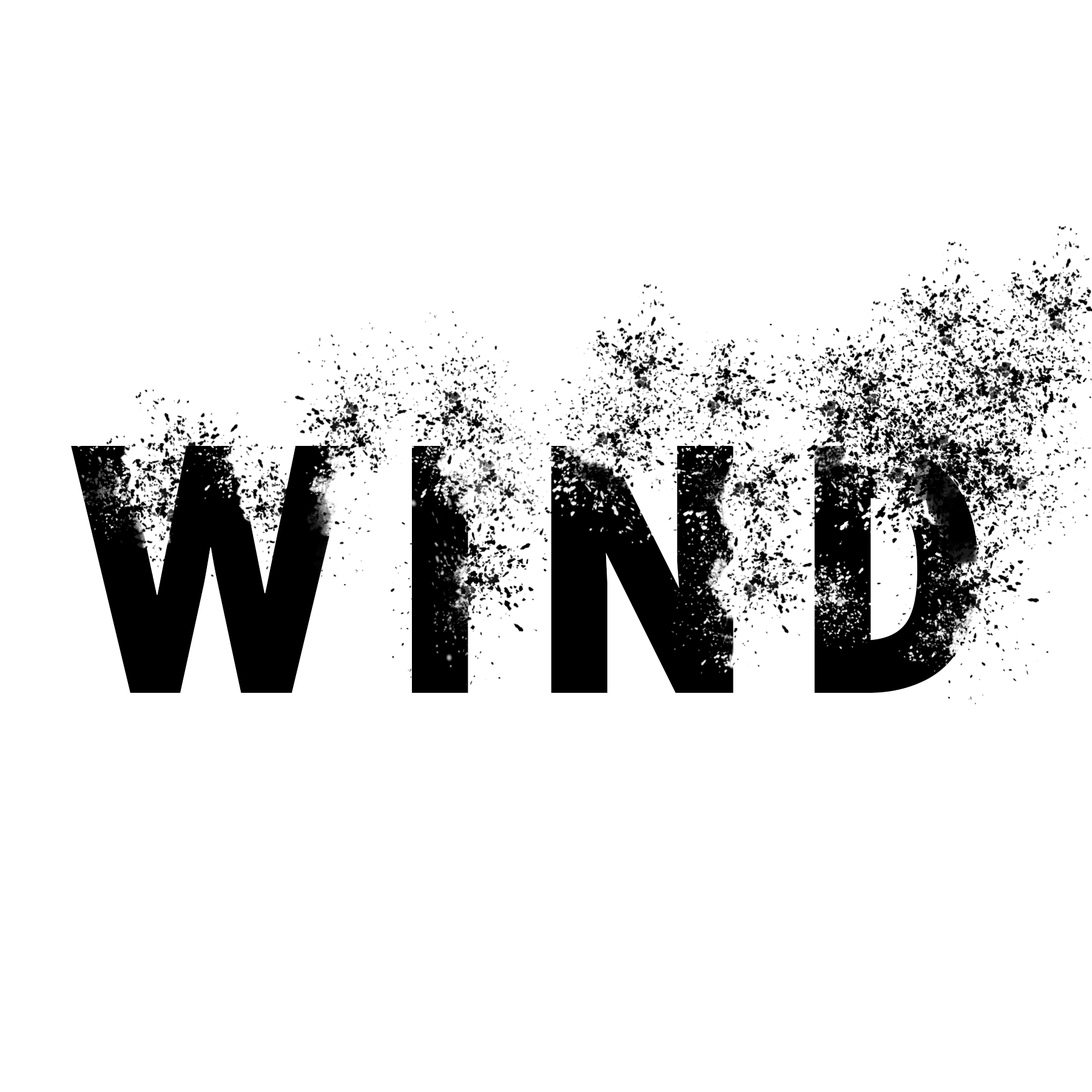
<style>
.page{position:relative;width:1092px;height:1092px;background:#ffffff}
.page>*{position:absolute;margin:0}
.t1{font:379.2px "TwCenMT-CondensedExtraBold";letter-spacing:0.075em;color:#000000}
</style>
<div class="page">
<p class="t1" style="left:71px;top:446px;width:908px;height:247px">WIND</p>
</div>
